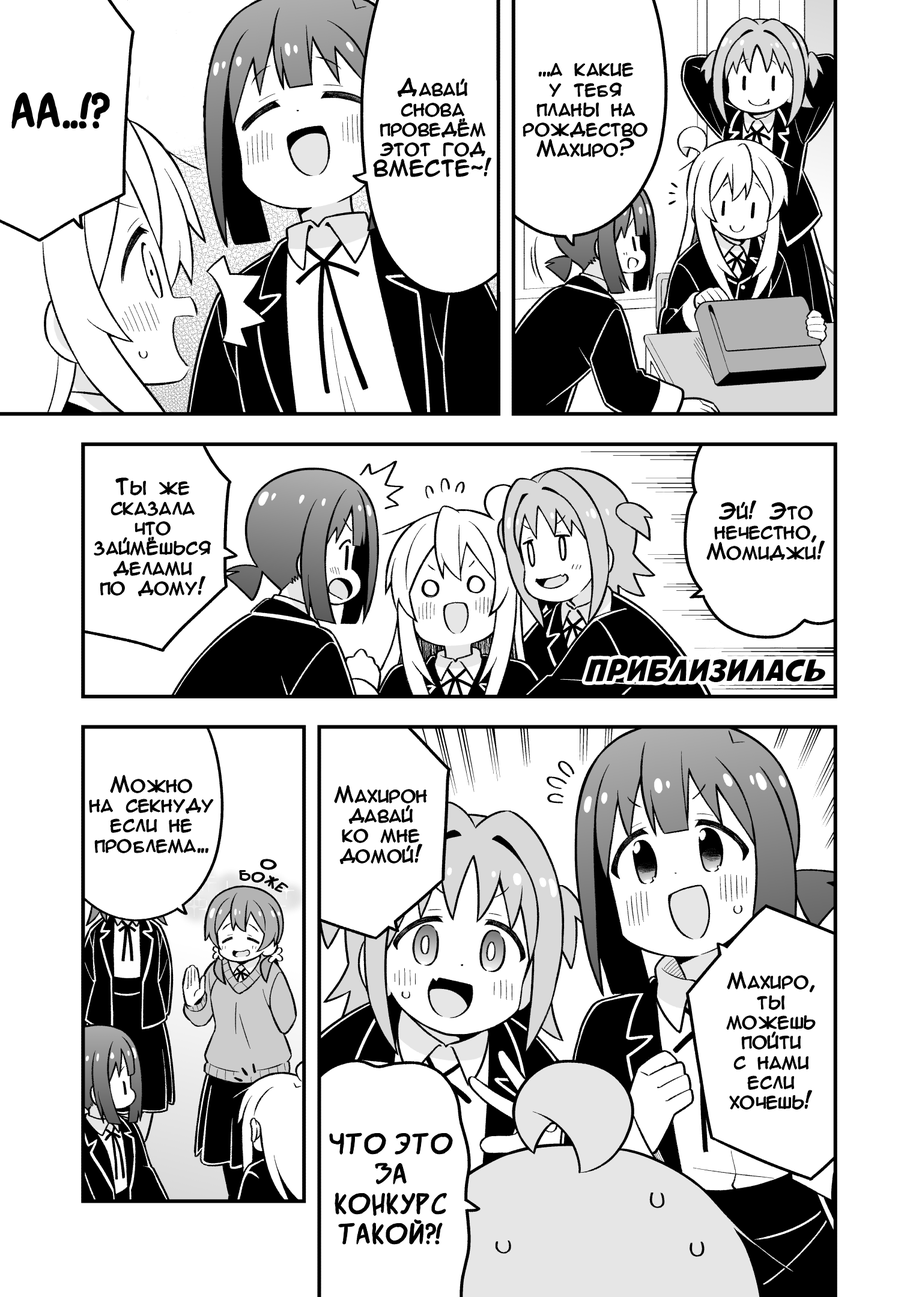
<style>
.page{position:relative;width:919px;height:1297px;background:#ffffff}
.page>*{position:absolute;margin:0}
.t1{font:20px/20px "AnimeAcev3";color:#000000}
.t2{font:50.1px "SuperWebcomicBros.Rusbyyakustick";color:#000000}
.t3{font:30px "AvengeanceMArusbyaLiNcE";color:#000000}
.t4{font:15px/15px "SuperWebcomicBros.Rusbyyakustick";color:#000000}
.t5{font:30px/30px "SuperWebcomicBros.Rusbyyakustick";color:#000000}
</style>
<div class="page">
<p class="t1" style="left:523px;top:63px;width:125px;height:94px;text-align:center">...а какие<br>у тебя<br>планы на<br>рождество<br>Махиро?</p>
<p class="t1" style="left:374px;top:78px;width:117px;height:99px;text-align:center">Давай<br>снова<br>проведём<br>этот год<br>ВМЕСТЕ~!</p>
<p class="t2" style="left:13px;top:93px;width:96px;height:35px">Аа..!?</p>
<p class="t1" style="left:94px;top:478px;width:117px;height:118px;text-align:center">Ты же<br>сказала<br>что<br>займёшься<br>делами<br>по дому!</p>
<p class="t1" style="left:707px;top:501px;width:118px;height:60px;text-align:center">Эй! Это<br>нечестно,<br>Момиджи!</p>
<p class="t3" style="left:585px;top:659px;width:240px;height:23px">Приблизилась</p>
<p class="t1" style="left:90px;top:775px;width:123px;height:79px;text-align:center">Можно<br>на секнуду<br>если не<br>проблема...</p>
<p class="t1" style="left:335px;top:786px;width:92px;height:78px;text-align:center">Махирон<br>давай<br>ко мне<br>домой!</p>
<p class="t4" style="left:239px;top:859px;width:49px;height:34px;text-align:center;rotate:18deg">О<br>боже</p>
<p class="t1" style="left:727px;top:972px;width:88px;height:138px;text-align:center">Махиро,<br>ты<br>можешь<br>пойти<br>с нами<br>если<br>хочешь!</p>
<p class="t5" style="left:330px;top:1133px;width:122px;height:112px;text-align:center">Что это<br>за<br>конкурс<br>такой?!</p>
</div>
